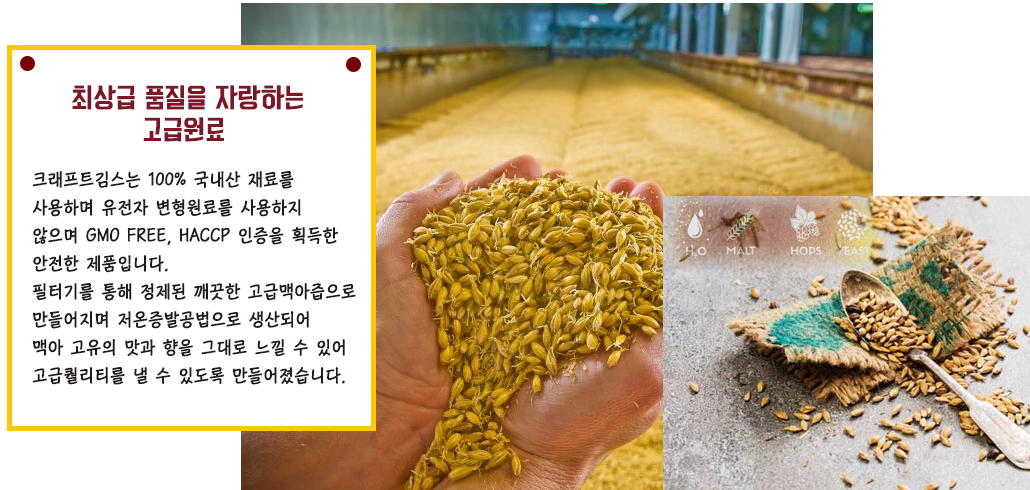
<style>
.page{position:relative;width:1030px;height:490px;background:#ffffff}
.page>*{position:absolute;margin:0}
.t1{font:25px/32px "KoreanYNMYT-M";color:#7e1628}
.t2{font:18px/28px "KoreanCNM-M";color:#22191b}
</style>
<div class="page">
<p class="t1" style="left:71px;top:85px;width:233px;height:57px;text-align:center">최상급 품질을 자랑하는<br>고급원료</p>
<p class="t2" style="left:32px;top:171px;width:324px;height:214px">크래프트김스는 100% 국내산 재료를<br>사용하며 유전자 변형원료를 사용하지<br>않으며 GMO FREE, HACCP 인증을 획득한<br>안전한 제품입니다.<br>필터기를 통해 정제된 깨끗한 고급맥아즙으로<br>만들어지며 저온증발공법으로 생산되어 <br>맥아 고유의 맛과 향을 그대로 느낄 수 있어<br>고급퀄리티를 낼 수 있도록 만들어졌습니다.</p>
</div>
